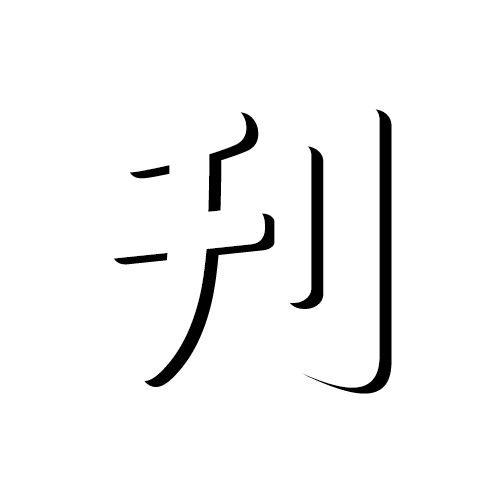
<style>
.page{position:relative;width:500px;height:500px;background:#ffffff}
.page>*{position:absolute;margin:0}
.t1{font:330.7px "UDDigiKyokashoNP-B";color:#ffffff}
</style>
<div class="page">
<p class="t1" style="left:111px;top:109px;width:281px;height:285px">刋</p>
</div>
